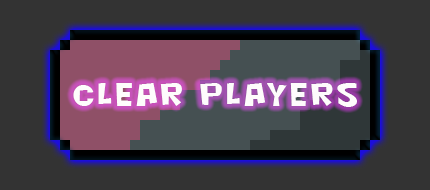
<style>
.page{position:relative;width:430px;height:190px;background:#333333}
.page>*{position:absolute;margin:0}
.t1{font:30px "NightclubBTN";letter-spacing:0.12em;color:#fefcfc}
</style>
<div class="page">
<p class="t1" style="left:73px;top:83px;width:284px;height:24px">Clear Players</p>
</div>
